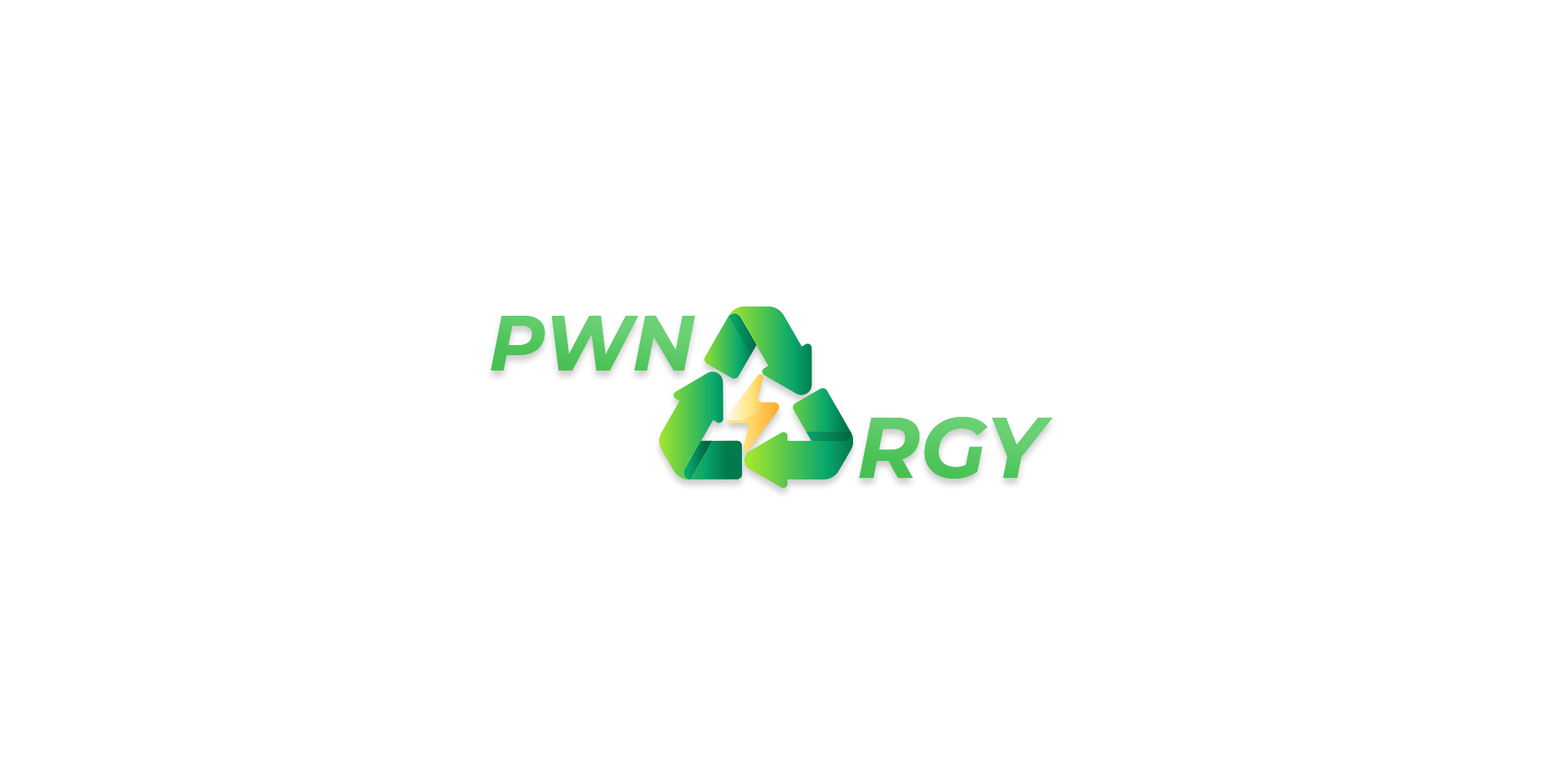
<style>
.page{position:relative;width:1544px;height:772px;background:#ffffff}
.page>*{position:absolute;margin:0}
.t1{font:77.2px "Montserrat-BoldItalic";color:#48c153}
.t2{font:85.8px "Montserrat-BoldItalic";color:#48c154}
</style>
<div class="page">
<p class="t1" style="left:490px;top:316px;width:206px;height:55px">PWN</p>
<p class="t2" style="left:859px;top:417px;width:194px;height:62px">RGY</p>
</div>
